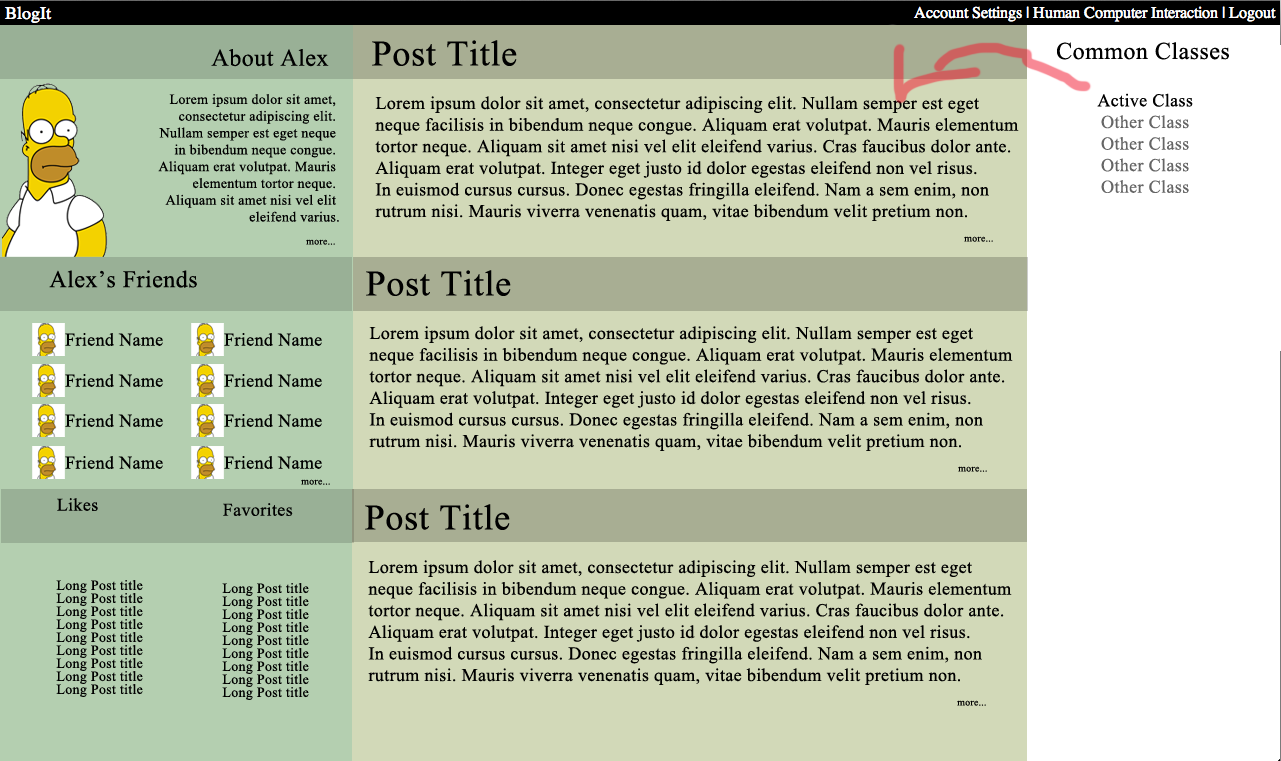
<style>
.page{position:relative;width:1281px;height:761px;background:#d2d9b8}
.page>*{position:absolute;margin:0}
.t1{font:36px "TimesNewRomanPSMT";letter-spacing:0.02em;color:#000000}
.t2{font:24px "TimesNewRomanPSMT";letter-spacing:0.02em;color:#000000}
.t3{font:14px "TimesNewRomanPSMT";letter-spacing:0.02em;color:#000000}
.t4{font:18px "TimesNewRomanPSMT";letter-spacing:0.02em;color:#000000}
.t5{font:18px "TimesNewRomanPSMT";letter-spacing:0.02em;color:#656565}
.t6{font:10px "TimesNewRomanPSMT";letter-spacing:0.02em;color:#000000}
</style>
<div class="page">
<p class="t1" style="left:372px;top:40px;width:145px;height:26px">Post Title</p>
<p class="t2" style="left:211px;top:49px;width:118px;height:18px">About Alex</p>
<p class="t2" style="left:1057px;top:42px;width:172px;height:18px">Common Classes</p>
<p class="t3" style="left:158px;top:94px;width:181px;height:128px;text-align:right">Lorem ipsum dolor sit amet, <br>consectetur adipiscing elit. <br>Nullam semper est eget neque <br>in bibendum neque congue. <br>Aliquam erat volutpat. Mauris <br>elementum tortor neque. <br>Aliquam sit amet nisi vel elit <br>eleifend varius.</p>
<p class="t4" style="left:375px;top:96px;width:644px;height:125px">Lorem ipsum dolor sit amet, consectetur adipiscing elit. Nullam semper est eget <br>neque facilisis in bibendum neque congue. Aliquam erat volutpat. Mauris elementum<br>tortor neque. Aliquam sit amet nisi vel elit eleifend varius. Cras faucibus dolor ante. <br>Aliquam erat volutpat. Integer eget justo id dolor egestas eleifend non vel risus.<br>In euismod cursus cursus. Donec egestas fringilla eleifend. Nam a sem enim, non <br>rutrum nisi. Mauris viverra venenatis quam, vitae bibendum velit pretium non.</p>
<p class="t5" style="left:1097px;top:93px;width:96px;height:100px;text-align:center"><span class="t4">Active Class<br></span>Other Class<br>Other Class<br>Other Class<br>Other Class</p>
<p class="t6" style="left:306px;top:239px;width:29px;height:6px">more...</p>
<p class="t6" style="left:964px;top:236px;width:29px;height:6px">more...</p>
<p class="t2" style="left:49px;top:270px;width:148px;height:18px">Alex’s Friends</p>
<p class="t1" style="left:366px;top:270px;width:145px;height:26px">Post Title</p>
<p class="t4" style="left:369px;top:326px;width:644px;height:125px">Lorem ipsum dolor sit amet, consectetur adipiscing elit. Nullam semper est eget <br>neque facilisis in bibendum neque congue. Aliquam erat volutpat. Mauris elementum<br>tortor neque. Aliquam sit amet nisi vel elit eleifend varius. Cras faucibus dolor ante. <br>Aliquam erat volutpat. Integer eget justo id dolor egestas eleifend non vel risus.<br>In euismod cursus cursus. Donec egestas fringilla eleifend. Nam a sem enim, non <br>rutrum nisi. Mauris viverra venenatis quam, vitae bibendum velit pretium non.</p>
<p class="t4" style="left:65px;top:333px;width:98px;height:13px">Friend Name</p>
<p class="t4" style="left:224px;top:333px;width:98px;height:13px">Friend Name</p>
<p class="t4" style="left:65px;top:374px;width:98px;height:13px">Friend Name</p>
<p class="t4" style="left:224px;top:374px;width:98px;height:13px">Friend Name</p>
<p class="t4" style="left:65px;top:414px;width:98px;height:13px">Friend Name</p>
<p class="t4" style="left:224px;top:414px;width:98px;height:13px">Friend Name</p>
<p class="t4" style="left:65px;top:456px;width:98px;height:13px">Friend Name</p>
<p class="t4" style="left:224px;top:456px;width:98px;height:13px">Friend Name</p>
<p class="t6" style="left:958px;top:466px;width:29px;height:6px">more...</p>
<p class="t6" style="left:301px;top:479px;width:29px;height:6px">more...</p>
<p class="t4" style="left:57px;top:498px;width:41px;height:13px">Likes</p>
<p class="t4" style="left:223px;top:503px;width:70px;height:13px">Favorites</p>
<p class="t1" style="left:365px;top:504px;width:145px;height:26px">Post Title</p>
<p class="t4" style="left:368px;top:560px;width:644px;height:125px">Lorem ipsum dolor sit amet, consectetur adipiscing elit. Nullam semper est eget <br>neque facilisis in bibendum neque congue. Aliquam erat volutpat. Mauris elementum<br>tortor neque. Aliquam sit amet nisi vel elit eleifend varius. Cras faucibus dolor ante. <br>Aliquam erat volutpat. Integer eget justo id dolor egestas eleifend non vel risus.<br>In euismod cursus cursus. Donec egestas fringilla eleifend. Nam a sem enim, non <br>rutrum nisi. Mauris viverra venenatis quam, vitae bibendum velit pretium non.</p>
<p class="t3" style="left:56px;top:580px;width:87px;height:13px">Long Post title</p>
<p class="t3" style="left:56px;top:593px;width:87px;height:13px">Long Post title</p>
<p class="t3" style="left:222px;top:583px;width:87px;height:13px">Long Post title</p>
<p class="t3" style="left:56px;top:606px;width:87px;height:13px">Long Post title</p>
<p class="t3" style="left:222px;top:596px;width:87px;height:13px">Long Post title</p>
<p class="t3" style="left:222px;top:609px;width:87px;height:13px">Long Post title</p>
<p class="t3" style="left:56px;top:619px;width:87px;height:13px">Long Post title</p>
<p class="t3" style="left:222px;top:622px;width:87px;height:13px">Long Post title</p>
<p class="t3" style="left:56px;top:632px;width:87px;height:13px">Long Post title</p>
<p class="t3" style="left:222px;top:635px;width:87px;height:13px">Long Post title</p>
<p class="t3" style="left:56px;top:645px;width:87px;height:13px">Long Post title</p>
<p class="t3" style="left:222px;top:648px;width:87px;height:13px">Long Post title</p>
<p class="t3" style="left:56px;top:658px;width:87px;height:13px">Long Post title</p>
<p class="t3" style="left:222px;top:661px;width:87px;height:13px">Long Post title</p>
<p class="t3" style="left:56px;top:671px;width:87px;height:13px">Long Post title</p>
<p class="t3" style="left:222px;top:674px;width:87px;height:13px">Long Post title</p>
<p class="t3" style="left:56px;top:684px;width:87px;height:13px">Long Post title</p>
<p class="t3" style="left:222px;top:687px;width:87px;height:13px">Long Post title</p>
<p class="t6" style="left:957px;top:700px;width:29px;height:6px">more...</p>
</div>
